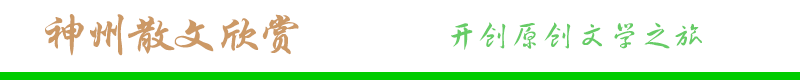
<style>
.page{position:relative;width:800px;height:80px;background:#ffffff}
.page>*{position:absolute;margin:0}
.t1{font:43.2px "FZXKJW--GB1-0";letter-spacing:-0.1em;color:#cc9966;scale:1.11 1}
.t2{font:32.4px "FZHCK--GBK1-0";letter-spacing:-0.1em;color:#66cc66;scale:1.11 1}
</style>
<div class="page">
<p class="t1" style="left:45px;top:14px;width:254px;height:42px">神州散文欣赏</p>
<p class="t2" style="left:451px;top:22px;width:251px;height:28px">开创原创文学之旅</p>
</div>
